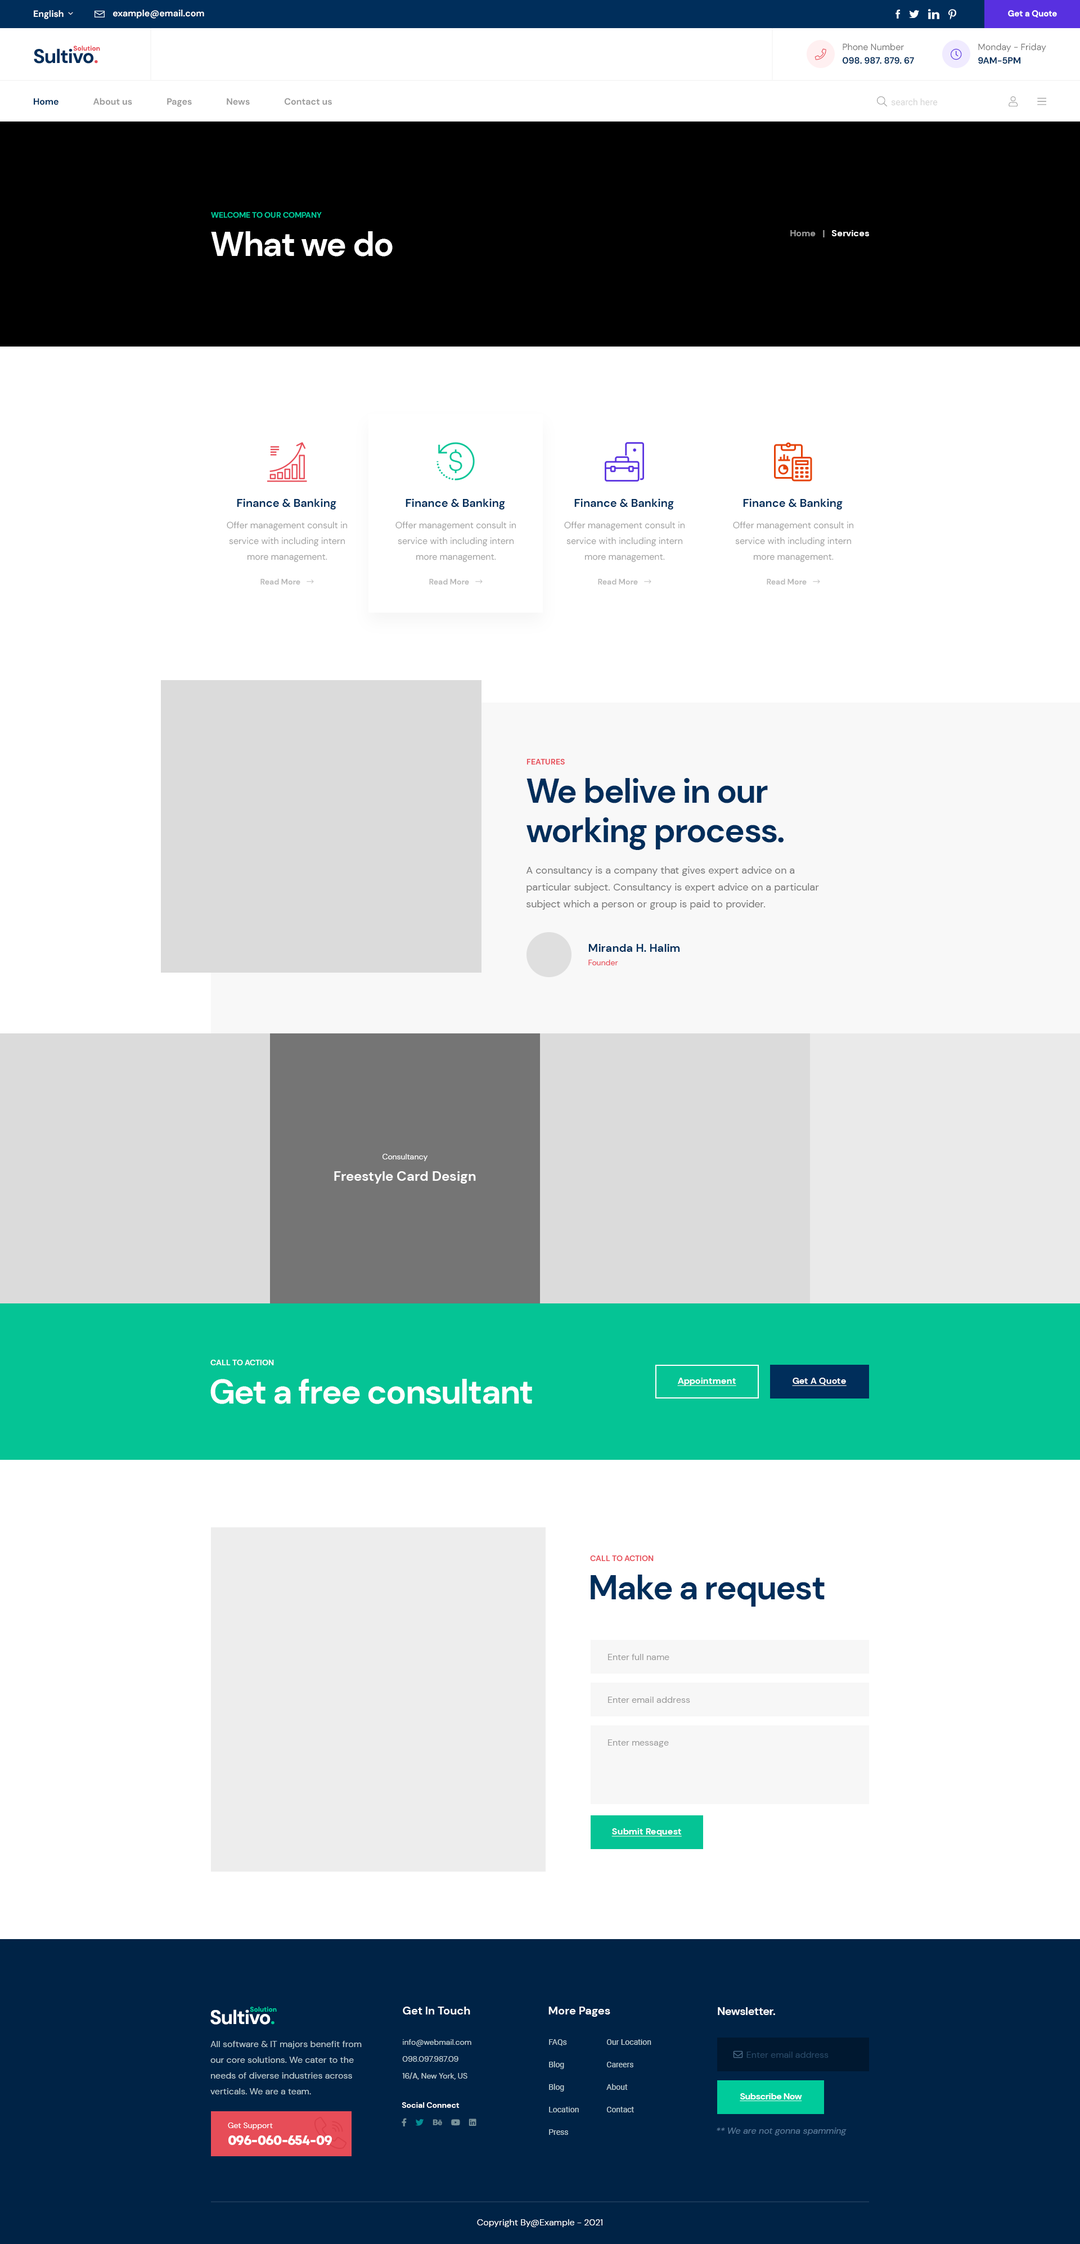
<style>
.page{position:relative;width:1080px;height:2244px;background:#ffffff}
.page>*{position:absolute;margin:0}
.t1{font:9px "DMSans-Bold";color:#ffffff}
.t2{font:8.4px "DMSans-Bold";color:#ffffff}
.t3{font:19.7px "DMSans-Bold";letter-spacing:-0.03em;color:#002e5b}
.t4{font:19.7px "DMSans-Bold";letter-spacing:-0.03em;color:#e74d58}
.t5{font:6.8px "DMSans-Bold";color:#e74d58}
.t6{font:9px/13.5px "DMSans-Bold";color:#002e5b}
.t7{font:9px/13.5px "DMSans-Regular";color:#777777}
.t8{font:9px "DMSans-Bold";color:#999999}
.t9{font:9px "DMSans-Bold";color:#002e5b}
.t10{font:7.9px "DMSans-Bold";color:#00cb9b;text-transform:uppercase}
.t11{font:33.8px "DMSans-Bold";letter-spacing:-0.03em;color:#ffffff}
.t12{font:11.2px "DMSans-Bold";color:#002e5b}
.t13{font:9px/15.8px "DMSans-Regular";color:#a0a0a0}
.t14{font:7.9px "DMSans-Bold";color:#e74d58;text-transform:uppercase}
.t15{font:33.8px/33.8px "DMSans-Bold";letter-spacing:-0.03em;color:#002e5b}
.t16{font:10.1px/16.9px "DMSans-Regular";color:#777777}
.t17{font:7.9px "DMSans-Regular";color:#e74d58}
.t18{font:7.9px "DMSans-Regular";color:#ffffff}
.t19{font:13.5px "DMSans-Bold";color:#ffffff}
.t20{font:7.9px "DMSans-Bold";color:#ffffff;text-transform:uppercase}
.t21{font:9px "DMSans-Bold";color:#ffffff;text-decoration:underline}
.t22{font:33.8px "DMSans-Bold";letter-spacing:-0.03em;color:#002e5b}
.t23{font:9px "DMSans-Regular";color:#999999}
.t24{font:19.7px "DMSans-Bold";letter-spacing:-0.03em;color:#ffffff}
.t25{font:19.7px "DMSans-Bold";letter-spacing:-0.03em;color:#00cb9b}
.t26{font:6.8px "DMSans-Bold";color:#00cb9b}
.t27{font:11.2px "DMSans-Bold";color:#ffffff}
.t28{font:11.2px "DMSans-Bold";letter-spacing:-0.03em;color:#ffffff}
.t29{font:9px/15.8px "DMSans-Regular";color:#bdced3}
.t30{font:7.9px/16.9px "DMSans-Regular";color:#bdced3}
.t31{font:7.9px/22.5px "Roboto-Regular";color:#bdced3}
.t32{font:9px "DMSans-Regular";color:#294866}
.t33{font:9px "FontAwesome5Pro-Light";color:#52708e}
.t34{font:9px "DMSans-Bold";letter-spacing:-0.03em;color:#ffffff;text-decoration:underline}
.t35{font:7.9px "DMSans-Bold";color:#ffffff}
.t36{font:13.5px/16.9px "Mont-HeavyDEMO";letter-spacing:-0.03em;color:#ffffff}
.t37{font:7.9px/16.9px "DMSans-Regular";color:#ffffff}
.t38{font:9px "DMSans-Italic";color:#5c7d9d}
.t39{font:9px "DMSans-Regular";color:#ffffff}
</style>
<div class="page">
<p class="t1" style="left:113px;top:10px;width:91px;height:9px">example@email.com</p>
<p class="t2" style="left:1008px;top:10px;width:49px;height:7px">Get a Quote</p>
<p class="t3" style="left:34px;top:48px;width:64px;height:16px">Sultivo<span class="t4">.</span></p>
<p class="t5" style="left:73px;top:46px;width:27px;height:5px">Solution</p>
<p class="t6" style="left:843px;top:43px;width:71px;height:21px"><span class="t7">Phone Number<br></span>098. 987. 879. 67</p>
<p class="t7" style="left:978px;top:43px;width:68px;height:21px">Monday - Friday<br><span class="t6">9AM-5PM</span></p>
<p class="t8" style="left:34px;top:98px;width:298px;height:9px"><span class="t9">Home                </span>About us                Pages                News                Contact us</p>
<p class="t10" style="left:211px;top:212px;width:111px;height:6px">welcome to our company</p>
<p class="t11" style="left:211px;top:231px;width:182px;height:25px">What we do</p>
<p class="t8" style="left:790px;top:230px;width:79px;height:7px">Home   |   <span class="t1">Services</span></p>
<p class="t12" style="left:237px;top:498px;width:99px;height:12px">Finance &amp; Banking</p>
<p class="t12" style="left:406px;top:498px;width:99px;height:12px">Finance &amp; Banking</p>
<p class="t12" style="left:574px;top:498px;width:100px;height:12px">Finance &amp; Banking</p>
<p class="t12" style="left:743px;top:498px;width:100px;height:12px">Finance &amp; Banking</p>
<p class="t13" style="left:227px;top:521px;width:120px;height:41px;text-align:center">Offer management consult in service with including intern more management.</p>
<p class="t13" style="left:395px;top:521px;width:121px;height:41px;text-align:center">Offer management consult in service with including intern more management.</p>
<p class="t13" style="left:564px;top:521px;width:121px;height:41px;text-align:center">Offer management consult in service with including intern more management.</p>
<p class="t13" style="left:733px;top:521px;width:120px;height:41px;text-align:center">Offer management consult in service with including intern more management.</p>
<p class="t14" style="left:526px;top:759px;width:39px;height:5px">features</p>
<p class="t15" style="left:526px;top:778px;width:258px;height:72px">We belive in our<br>working process.</p>
<p class="t16" style="left:526px;top:866px;width:293px;height:44px">A consultancy is a company that gives expert advice on a<br>particular subject. Consultancy is expert advice on a particular<br>subject which a person or group is paid to provider.</p>
<p class="t12" style="left:588px;top:944px;width:92px;height:8px">Miranda H. Halim</p>
<p class="t17" style="left:588px;top:960px;width:30px;height:5px">Founder</p>
<p class="t18" style="left:382px;top:1154px;width:46px;height:7px">Consultancy</p>
<p class="t19" style="left:334px;top:1171px;width:142px;height:13px">Freestyle Card Design</p>
<p class="t20" style="left:210px;top:1360px;width:64px;height:5px">call to action</p>
<p class="t11" style="left:210px;top:1379px;width:322px;height:25px">Get a free consultant</p>
<p class="t21" style="left:677px;top:1378px;width:59px;height:8px">Appointment</p>
<p class="t21" style="left:792px;top:1378px;width:55px;height:8px">Get A Quote</p>
<p class="t14" style="left:590px;top:1555px;width:64px;height:6px">call to action</p>
<p class="t22" style="left:591px;top:1574px;width:234px;height:32px">Make a request</p>
<p class="t23" style="left:608px;top:1654px;width:61px;height:6px">Enter full name</p>
<p class="t23" style="left:608px;top:1696px;width:82px;height:7px">Enter email address</p>
<p class="t23" style="left:608px;top:1739px;width:61px;height:8px">Enter message</p>
<p class="t21" style="left:611px;top:1828px;width:71px;height:9px">Submit Request</p>
<p class="t24" style="left:210px;top:2009px;width:64px;height:15px">Sultivo<span class="t25">.</span></p>
<p class="t26" style="left:250px;top:2006px;width:27px;height:6px">Solution</p>
<p class="t27" style="left:403px;top:2006px;width:67px;height:8px">Get In Touch</p>
<p class="t27" style="left:548px;top:2006px;width:62px;height:11px">More Pages</p>
<p class="t28" style="left:718px;top:2007px;width:57px;height:8px">Newsletter.</p>
<p class="t29" style="left:210px;top:2041px;width:152px;height:53px">All software &amp; IT majors benefit from<br>our core solutions. We cater to the<br>needs of diverse industries across<br>verticals. We are a team.</p>
<p class="t30" style="left:402px;top:2039px;width:69px;height:41px">info@webmail.com<br>098.097.987.09<br>16/A, New York, US</p>
<p class="t31" style="left:549px;top:2039px;width:30px;height:96px">FAQs<br>Blog<br>Blog<br>Location<br>Press</p>
<p class="t31" style="left:606px;top:2039px;width:45px;height:73px">Our Location<br>Careers<br>About<br>Contact</p>
<p class="t32" style="left:733px;top:2050px;width:96px;height:8px"><span class="t33">envelope </span>Enter email address</p>
<p class="t34" style="left:740px;top:2093px;width:62px;height:8px">Subscribe Now</p>
<p class="t35" style="left:402px;top:2102px;width:58px;height:6px">Social Connect</p>
<p class="t36" style="left:228px;top:2122px;width:104px;height:23px"><span class="t37">Get Support<br></span>096-060-654-09</p>
<p class="t38" style="left:717px;top:2127px;width:130px;height:8px">** We are not gonna spamming</p>
<p class="t39" style="left:477px;top:2219px;width:125px;height:8px">Copyright By@Example - 2021</p>
</div>
